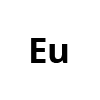
<style>
.page{position:relative;width:100px;height:100px;background:#ffffff}
.page>*{position:absolute;margin:0}
.t1{font:35px "OpenSans-Bold";color:#000000}
</style>
<div class="page">
<p class="t1" style="left:31px;top:38px;width:37px;height:25px">Eu</p>
</div>
